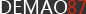
<style>
.page{position:relative;width:86px;height:14px;background:#333333}
.page>*{position:absolute;margin:0}
.t1{font:18px "MicrosoftYaHei";color:#ffffff}
.t2{font:18px "MicrosoftYaHei";color:#d12610;scale:0.96 1}
</style>
<div class="page">
<p class="t1" style="left:0px;top:0px;width:68px;height:14px">DEMAO</p>
<p class="t2" style="left:67px;top:0px;width:20px;height:14px">87</p>
</div>
